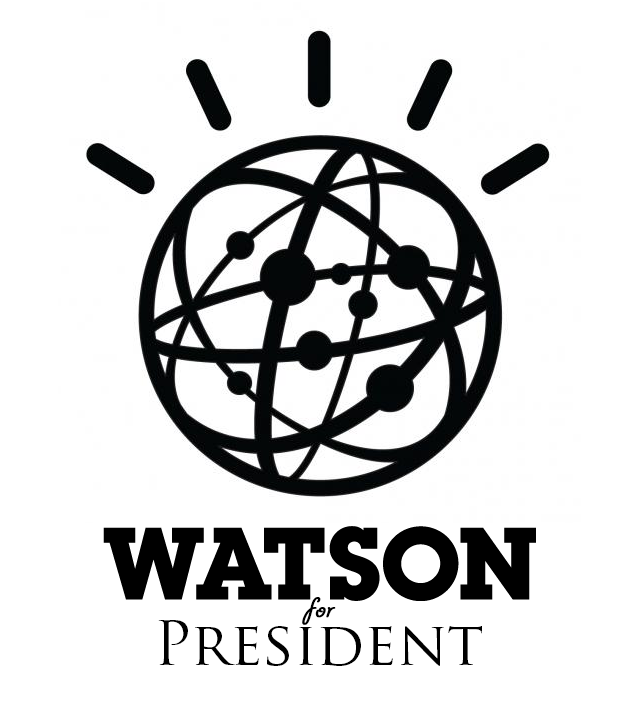
<style>
.page{position:relative;width:640px;height:720px;background:#ffffff}
.page>*{position:absolute;margin:0}
.t1{font:30px "GiddyupStd";color:#000000;font-weight:bold;font-style:italic}
.t2{font:60px "TrajanPro-Regular";color:#000000}
</style>
<div class="page">
<p class="t1" style="left:302px;top:597px;width:34px;height:28px">for</p>
<p class="t2" style="left:158px;top:620px;width:324px;height:46px">President</p>
</div>
